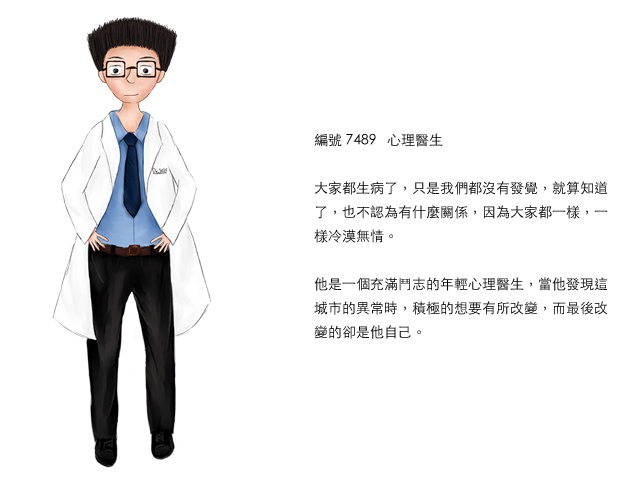
<style>
.page{position:relative;width:640px;height:480px;background:#ffffff}
.page>*{position:absolute;margin:0}
.t1{font:14px/24px "STHeitiTC-Light";color:#000000}
</style>
<div class="page">
<p class="t1" style="left:314px;top:133px;width:294px;height:206px">編號 7489   心理醫生<br><br>大家都生病了，只是我們都沒有發覺，就算知道了，也不認為有什麼關係，因為大家都一樣，一樣冷漠無情。<br><br>他是一個充滿鬥志的年輕心理醫生，當他發現這城市的異常時，積極的想要有所改變，而最後改變的卻是他自己。</p>
</div>
